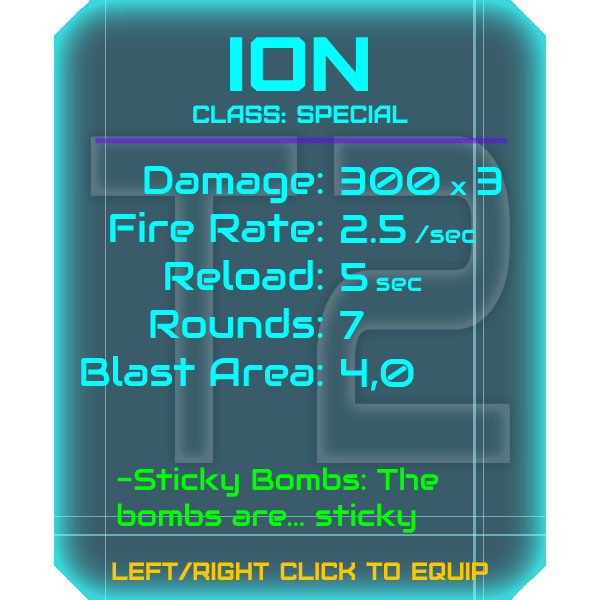
<style>
.page{position:relative;width:600px;height:600px;background:#3a5c6a}
.page>*{position:absolute;margin:0}
.t1{font:76.8px "Furore";color:#00ffff;scale:1.13 1}
.t2{font:25px "Furore";color:#00ffff}
.t3{font:40px "Audiowide-Regular";color:#00ffff}
.t4{font:25px "Audiowide-Regular";color:#00ffff}
.t5{font:30px "Audiowide-Regular";color:#00ff00}
.t6{font:40px "Audiowide-Regular";color:#00ff00}
.t7{font:25px "Furore";color:#ffc700}
</style>
<div class="page">
<p class="t1" style="left:230px;top:37px;width:138px;height:54px">ion</p>
<p class="t2" style="left:193px;top:105px;width:215px;height:18px">Class: Special</p>
<p class="t3" style="left:81px;top:165px;width:242px;height:221px;text-align:right">Damage:<br>Fire Rate:<br>Reload:<br>Rounds:<br>Blast Area:</p>
<p class="t3" style="left:340px;top:166px;width:162px;height:225px">300 <span class="t4">x </span>3<br>2.5 <span class="t4">/sec<br></span>5 <span class="t4">sec<br></span>7<br>4,0</p>
<p class="t5" style="left:117px;top:467px;width:322px;height:66px"><span class="t6"><br><br><br><br><br><br></span>-Sticky Bombs: The<br>bombs are... sticky</p>
<p class="t7" style="left:112px;top:562px;width:376px;height:18px">left/right click to equip</p>
</div>
